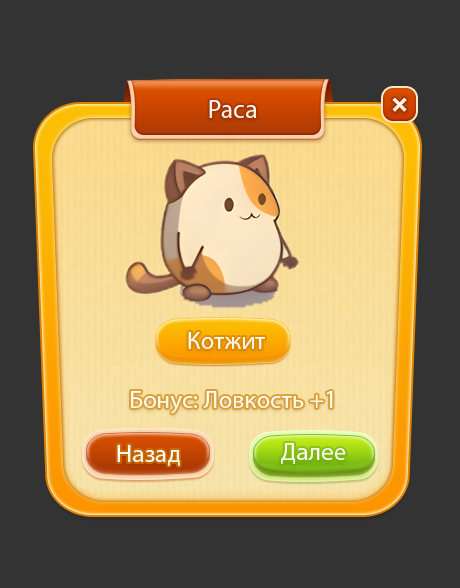
<style>
.page{position:relative;width:460px;height:588px;background:#333333}
.page>*{position:absolute;margin:0}
.t1{font:26px "MyriadPro-Regular";color:#fdf6e8}
.t2{font:25px "MyriadPro-Regular";color:#fdf6e8}
.t3{font:25px "MyriadPro-Regular";color:#ffffff}
</style>
<div class="page">
<p class="t1" style="left:209px;top:100px;width:48px;height:18px">Раса</p>
<p class="t2" style="left:188px;top:332px;width:77px;height:17px">Котжит</p>
<p class="t3" style="left:131px;top:391px;width:202px;height:23px">Бонус: Ловкость +1</p>
<p class="t3" style="left:281px;top:443px;width:65px;height:21px">Далее</p>
</div>
